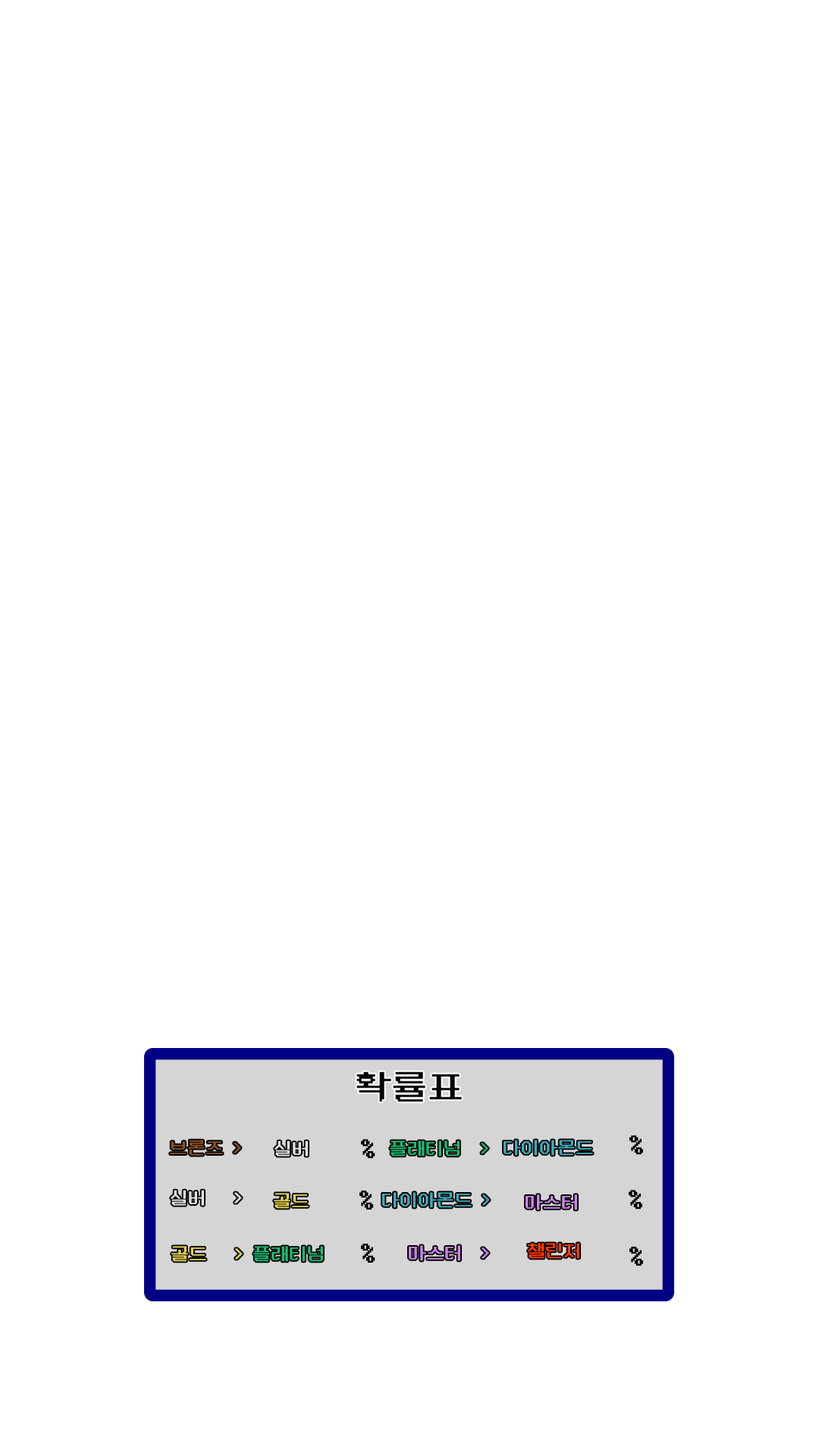
<style>
.page{position:relative;width:819px;height:1456px;background:#ffffff}
.page>*{position:absolute;margin:0}
.t1{font:36.4px "DungGeunMo";color:#000000}
.t2{font:18.2px "DungGeunMo";color:#dfe1e0}
.t3{font:27.2px "DungGeunMo";color:#000000}
.t4{font:18.2px "DungGeunMo";color:#22b672}
.t5{font:18.2px "DungGeunMo";color:#41aab9}
.t6{font:18.2px "DungGeunMo";color:#e3cf59}
.t7{font:18.2px "DungGeunMo";color:#cb84f1}
.t8{font:18.2px "DungGeunMo";color:#ff3d00}
</style>
<div class="page">
<p class="t1" style="left:356px;top:1072px;width:106px;height:30px">확률표</p>
<p class="t2" style="left:275px;top:1141px;width:33px;height:15px">실버</p>
<p class="t3" style="left:361px;top:1139px;width:14px;height:20px">%</p>
<p class="t4" style="left:390px;top:1141px;width:98px;height:15px">플래티넘  &gt;</p>
<p class="t5" style="left:504px;top:1140px;width:89px;height:16px">다이아몬드</p>
<p class="t3" style="left:629px;top:1135px;width:14px;height:20px">%</p>
<p class="t6" style="left:274px;top:1193px;width:35px;height:16px">골드</p>
<p class="t3" style="left:359px;top:1191px;width:15px;height:19px">%</p>
<p class="t5" style="left:382px;top:1192px;width:108px;height:16px">다이아몬드 &gt;</p>
<p class="t3" style="left:629px;top:1190px;width:13px;height:20px">%</p>
<p class="t7" style="left:526px;top:1194px;width:51px;height:16px">마스터</p>
<p class="t4" style="left:253px;top:1246px;width:70px;height:16px">플래티넘</p>
<p class="t3" style="left:361px;top:1244px;width:14px;height:19px">%</p>
<p class="t7" style="left:409px;top:1245px;width:80px;height:16px">마스터  &gt;</p>
<p class="t8" style="left:528px;top:1243px;width:51px;height:16px">챌린저</p>
<p class="t3" style="left:629px;top:1247px;width:14px;height:19px">%</p>
</div>
